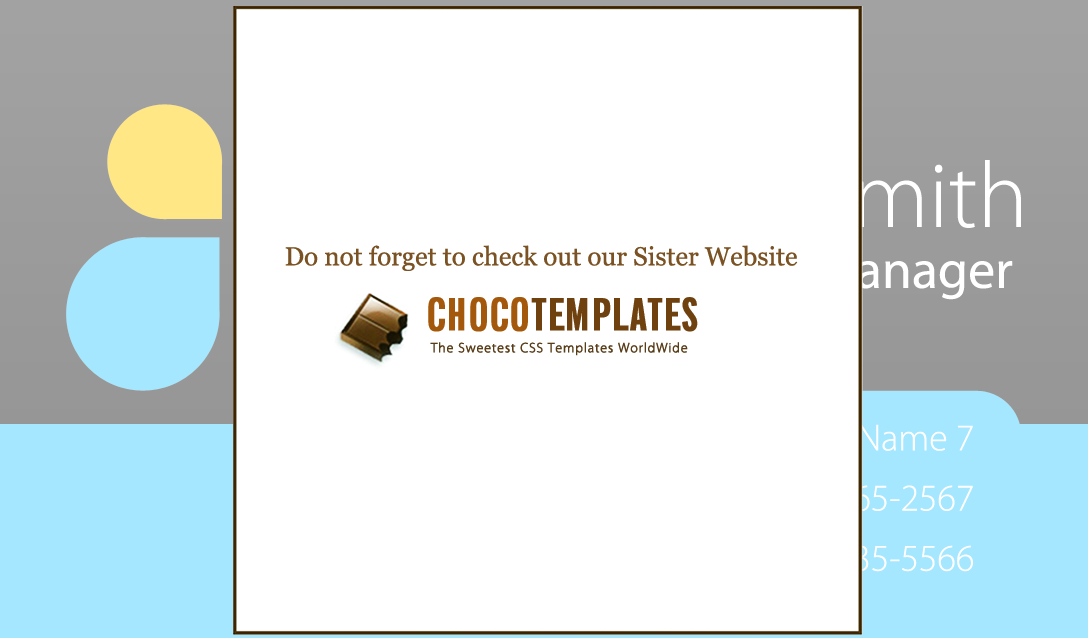
<style>
.page{position:relative;width:1088px;height:638px;background:#ffffff}
.page>*{position:absolute;margin:0}
.t1{font:25.9px "Georgia";color:#7a5123}
.t2{font:54px "MyriadPro-Regular";color:#ffffff}
.t3{font:43.8px "NewsGothicBT-BoldExtraCondensed";letter-spacing:0.01em;color:#6f410f;font-weight:bold}
.t4{font:43.8px "NewsGothicBT-BoldExtraCondensed";letter-spacing:0.01em;color:#a4580b;font-weight:bold}
.t5{font:13.6px "MyriadPro-Light";letter-spacing:0.05em;color:#583d1b;font-weight:bold}
</style>
<div class="page">
<p class="t1" style="left:285px;top:245px;width:513px;height:26px">Do not forget to check out our Sister Website</p>
<p class="t2" style="left:814px;top:261px;width:199px;height:39px">manager</p>
<p class="t3" style="left:428px;top:297px;width:270px;height:35px"><span class="t4">CHOCO</span>TEMPLATES</p>
<p class="t5" style="left:430px;top:342px;width:258px;height:14px">The Sweetest CSS Templates WorldWide</p>
</div>
